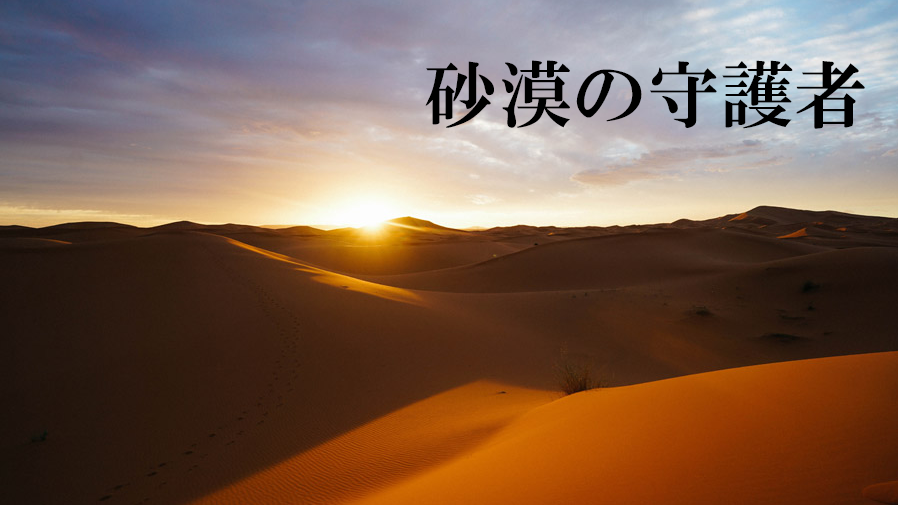
<style>
.page{position:relative;width:898px;height:505px}
.page>*{position:absolute;margin:0}
.t1{font:74.2px "HGSMinchoE";color:#000000}
</style>
<div class="page">
<p class="t1" style="left:425px;top:60px;width:440px;height:69px">砂漠の守護者</p>
</div>
